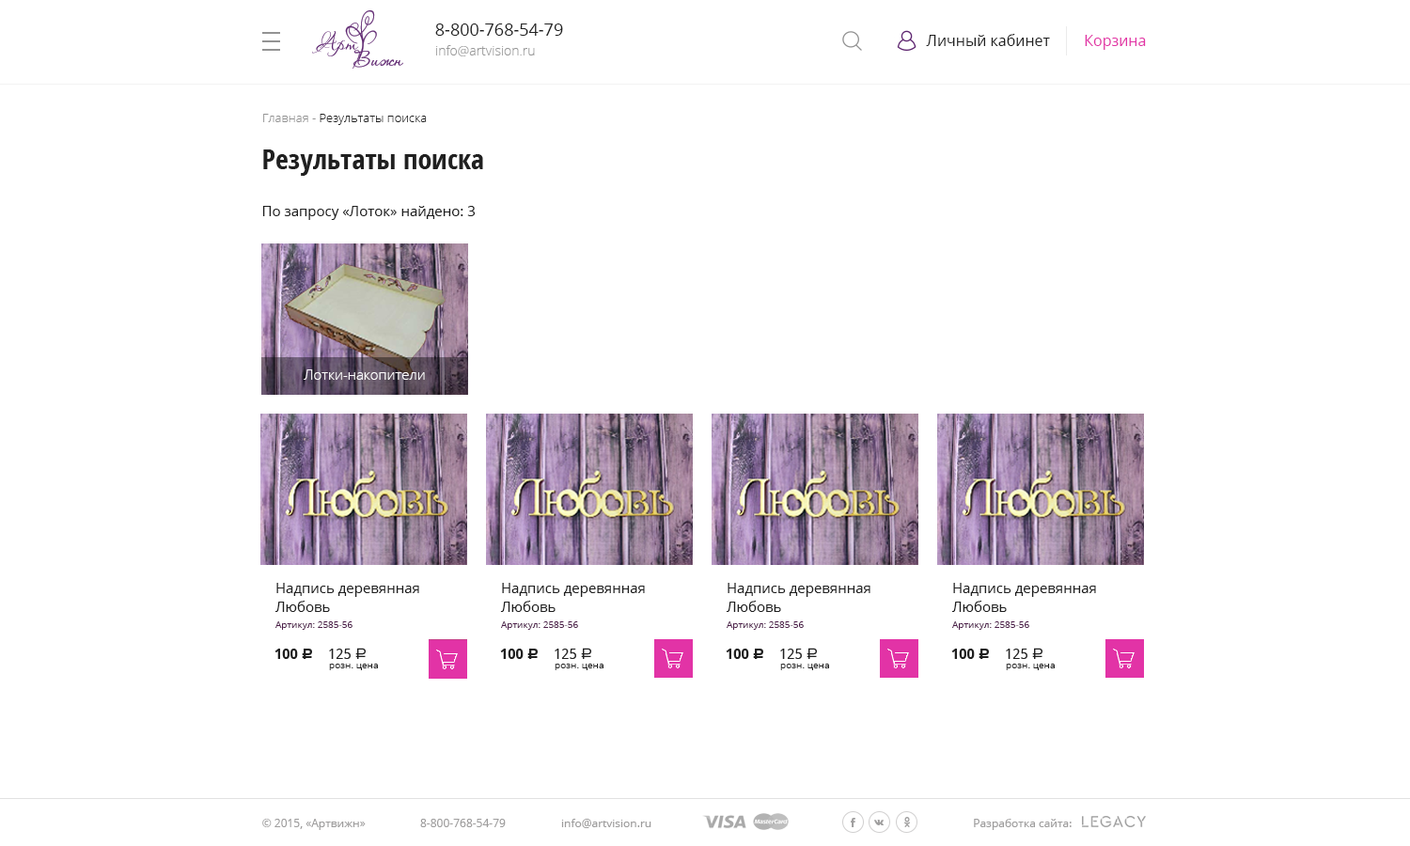
<style>
.page{position:relative;width:1410px;height:846px;background:#ffffff}
.page>*{position:absolute;margin:0}
.t1{font:16.9px "OpenSans";color:#202020}
.t2{font:15px "OpenSans";color:#202020}
.t3{font:15px "OpenSans";color:#e233a6}
.t4{font:13.2px "OpenSans-Light";color:#999999}
.t5{font:12.2px "OpenSans-Light";color:#202020}
.t6{font:12.2px "OpenSans-Light";color:#939393}
.t7{font:28.2px "OpenSans-CondensedBold";color:#202020}
.t8{font:14.1px "OpenSans";color:#202020}
.t9{font:14.1px "OpenSans-Light";color:#ffffff}
.t10{font:14.1px/18.8px "OpenSans";color:#202020}
.t11{font:9.4px "OpenSans";color:#4e1f4b}
.t12{font:14.1px "DroidSans-Bold";color:#1f1f1f}
.t13{font:15px "ALSRubl";color:#1f1f1f}
.t14{font:14.1px "DroidSans";color:#202020}
.t15{font:15px "ALSRubl";color:#202020}
.t16{font:9.4px "OpenSans";color:#202020}
.t17{font:11.3px "OpenSans";color:#9e9d9d}
</style>
<div class="page">
<p class="t1" style="left:435px;top:23px;width:128px;height:13px">8-800-768-54-79</p>
<p class="t2" style="left:926px;top:34px;width:124px;height:12px">Личный кабинет</p>
<p class="t3" style="left:1085px;top:35px;width:61px;height:15px">Корзина</p>
<p class="t4" style="left:436px;top:45px;width:99px;height:11px">info@artvision.ru</p>
<p class="t5" style="left:263px;top:114px;width:164px;height:11px"><span class="t6">Главная - </span>Результаты поиска</p>
<p class="t7" style="left:263px;top:149px;width:220px;height:27px">Результаты поиска</p>
<p class="t8" style="left:262px;top:206px;width:213px;height:14px">По запросу «Лоток» найдено: 3</p>
<p class="t9" style="left:304px;top:369px;width:121px;height:11px">Лотки-накопители</p>
<p class="t10" style="left:274px;top:583px;width:145px;height:29px">Надпись деревянная<br>Любовь</p>
<p class="t10" style="left:500px;top:583px;width:145px;height:29px">Надпись деревянная<br>Любовь</p>
<p class="t10" style="left:726px;top:583px;width:144px;height:29px">Надпись деревянная<br>Любовь</p>
<p class="t10" style="left:951px;top:583px;width:145px;height:29px">Надпись деревянная<br>Любовь</p>
<p class="t11" style="left:275px;top:621px;width:77px;height:9px">Артикул: 2585-56</p>
<p class="t11" style="left:501px;top:621px;width:77px;height:9px">Артикул: 2585-56</p>
<p class="t11" style="left:726px;top:621px;width:78px;height:9px">Артикул: 2585-56</p>
<p class="t11" style="left:952px;top:621px;width:77px;height:9px">Артикул: 2585-56</p>
<p class="t12" style="left:274px;top:648px;width:38px;height:11px">100 <span class="t13">c</span></p>
<p class="t14" style="left:329px;top:648px;width:37px;height:11px">125 <span class="t15">a</span></p>
<p class="t12" style="left:500px;top:648px;width:38px;height:11px">100 <span class="t13">c</span></p>
<p class="t14" style="left:555px;top:648px;width:36px;height:11px">125 <span class="t15">a</span></p>
<p class="t12" style="left:726px;top:648px;width:37px;height:11px">100 <span class="t13">c</span></p>
<p class="t14" style="left:780px;top:648px;width:37px;height:11px">125 <span class="t15">a</span></p>
<p class="t12" style="left:951px;top:648px;width:38px;height:11px">100 <span class="t13">c</span></p>
<p class="t14" style="left:1006px;top:648px;width:36px;height:11px">125 <span class="t15">a</span></p>
<p class="t16" style="left:329px;top:664px;width:49px;height:6px">розн. цена</p>
<p class="t16" style="left:555px;top:664px;width:48px;height:6px">розн. цена</p>
<p class="t16" style="left:780px;top:664px;width:49px;height:6px">розн. цена</p>
<p class="t16" style="left:1006px;top:664px;width:48px;height:6px">розн. цена</p>
<p class="t17" style="left:262px;top:819px;width:104px;height:11px">© 2015, «Артвижн»</p>
<p class="t17" style="left:420px;top:819px;width:86px;height:8px">8-800-768-54-79</p>
<p class="t17" style="left:561px;top:819px;width:90px;height:9px">info@artvision.ru</p>
<p class="t17" style="left:974px;top:819px;width:97px;height:11px">Разработка сайта:</p>
</div>
